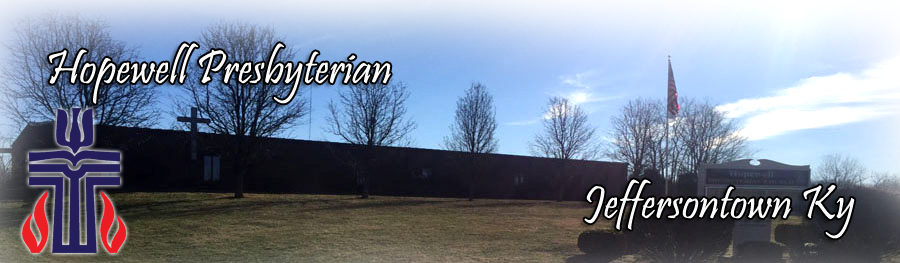
<style>
.page{position:relative;width:900px;height:263px}
.page>*{position:absolute;margin:0}
.t1{font:48px "Pristina-Regular";color:#fbfbfb}
</style>
<div class="page">
<p class="t1" style="left:49px;top:43px;width:342px;height:61px">Hopewell Presbyterian</p>
<p class="t1" style="left:584px;top:179px;width:271px;height:60px">Jeffersontown Ky</p>
</div>
